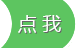
<style>
.page{position:relative;width:76px;height:48px;background:#5dc560}
.page>*{position:absolute;margin:0}
.t1{font:19px "MicrosoftYaHei";color:#ffffff}
.t2{font:19px "MicrosoftYaHei";color:#656565}
</style>
<div class="page">
<p class="t1" style="left:18px;top:15px;width:43px;height:18px">点 我</p>
<p class="t2" style="left:19px;top:16px;width:43px;height:18px">点 我</p>
</div>
